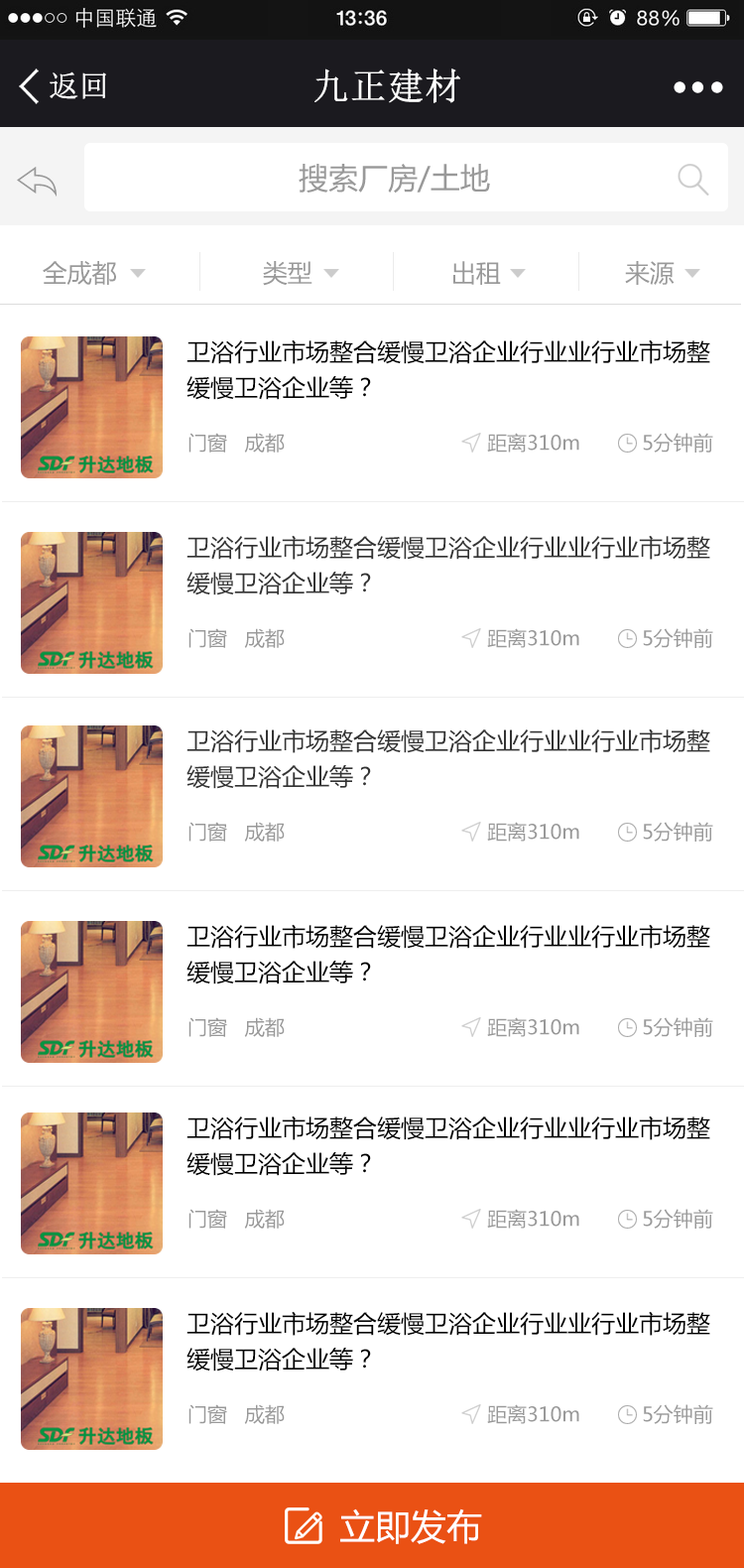
<style>
.page{position:relative;width:744px;height:1568px;background:#ffffff}
.page>*{position:absolute;margin:0}
.t1{font:29.8px "NSimSun";color:#ffffff;font-weight:bold}
.t2{font:36.4px "NSimSun";color:#ffffff;font-weight:bold}
.t3{font:29.8px "MicrosoftYaHei";color:#999999}
.t4{font:24.8px "MicrosoftYaHei";color:#999999}
.t5{font:23.8px/35.7px "MicrosoftYaHei";color:#000000}
.t6{font:19.8px "MicrosoftYaHei";color:#999999}
.t7{font:23.8px/35.7px "MicrosoftYaHei";color:#333333}
.t8{font:35.7px "MicrosoftYaHei";color:#ffffff}
</style>
<div class="page">
<p class="t1" style="left:50px;top:71px;width:56px;height:28px">返回</p>
<p class="t2" style="left:315px;top:68px;width:145px;height:35px">九正建材</p>
<p class="t3" style="left:299px;top:164px;width:191px;height:30px">搜索厂房/土地</p>
<p class="t4" style="left:43px;top:261px;width:632px;height:25px">全成都                    类型                   出租                 来源</p>
<p class="t5" style="left:187px;top:339px;width:524px;height:61px">卫浴行业市场整合缓慢卫浴企业行业业行业市场整<br>缓慢卫浴企业等？</p>
<p class="t6" style="left:189px;top:433px;width:96px;height:20px">门窗   成都</p>
<p class="t6" style="left:487px;top:433px;width:93px;height:20px">距离310m</p>
<p class="t6" style="left:643px;top:433px;width:71px;height:20px">5分钟前</p>
<p class="t7" style="left:187px;top:535px;width:524px;height:60px">卫浴行业市场整合缓慢卫浴企业行业业行业市场整<br>缓慢卫浴企业等？</p>
<p class="t6" style="left:189px;top:628px;width:96px;height:20px">门窗   成都</p>
<p class="t6" style="left:487px;top:628px;width:93px;height:20px">距离310m</p>
<p class="t6" style="left:643px;top:628px;width:71px;height:20px">5分钟前</p>
<p class="t7" style="left:187px;top:728px;width:524px;height:61px">卫浴行业市场整合缓慢卫浴企业行业业行业市场整<br>缓慢卫浴企业等？</p>
<p class="t6" style="left:189px;top:822px;width:96px;height:20px">门窗   成都</p>
<p class="t6" style="left:487px;top:822px;width:93px;height:20px">距离310m</p>
<p class="t6" style="left:643px;top:822px;width:71px;height:20px">5分钟前</p>
<p class="t5" style="left:187px;top:924px;width:524px;height:60px">卫浴行业市场整合缓慢卫浴企业行业业行业市场整<br>缓慢卫浴企业等？</p>
<p class="t6" style="left:189px;top:1017px;width:96px;height:20px">门窗   成都</p>
<p class="t6" style="left:487px;top:1017px;width:93px;height:20px">距离310m</p>
<p class="t6" style="left:643px;top:1017px;width:71px;height:20px">5分钟前</p>
<p class="t5" style="left:187px;top:1115px;width:524px;height:61px">卫浴行业市场整合缓慢卫浴企业行业业行业市场整<br>缓慢卫浴企业等？</p>
<p class="t6" style="left:189px;top:1209px;width:96px;height:20px">门窗   成都</p>
<p class="t6" style="left:487px;top:1209px;width:93px;height:20px">距离310m</p>
<p class="t6" style="left:643px;top:1209px;width:71px;height:20px">5分钟前</p>
<p class="t5" style="left:187px;top:1311px;width:524px;height:61px">卫浴行业市场整合缓慢卫浴企业行业业行业市场整<br>缓慢卫浴企业等？</p>
<p class="t6" style="left:189px;top:1404px;width:96px;height:20px">门窗   成都</p>
<p class="t6" style="left:487px;top:1404px;width:93px;height:20px">距离310m</p>
<p class="t6" style="left:643px;top:1404px;width:71px;height:20px">5分钟前</p>
<p class="t8" style="left:340px;top:1508px;width:142px;height:36px">立即发布</p>
</div>
